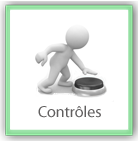
<style>
.page{position:relative;width:138px;height:141px;background:#ffffff}
.page>*{position:absolute;margin:0}
.t1{font:15.9px "MyriadPro-Regular";color:#615f5f}
</style>
<div class="page">
<p class="t1" style="left:38px;top:105px;width:63px;height:13px">Contrôles</p>
</div>
